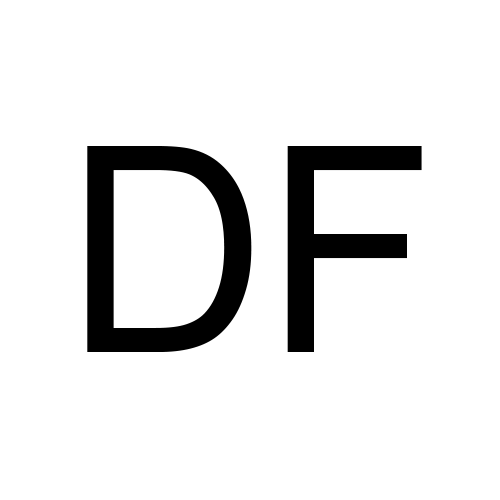
<style>
.page{position:relative;width:500px;height:500px;background:#ffffff}
.page>*{position:absolute;margin:0}
.t1{font:287.7px "ArialMT";color:#000000;scale:0.96 1}
</style>
<div class="page">
<p class="t1" style="left:87px;top:146px;width:335px;height:206px">DF</p>
</div>
